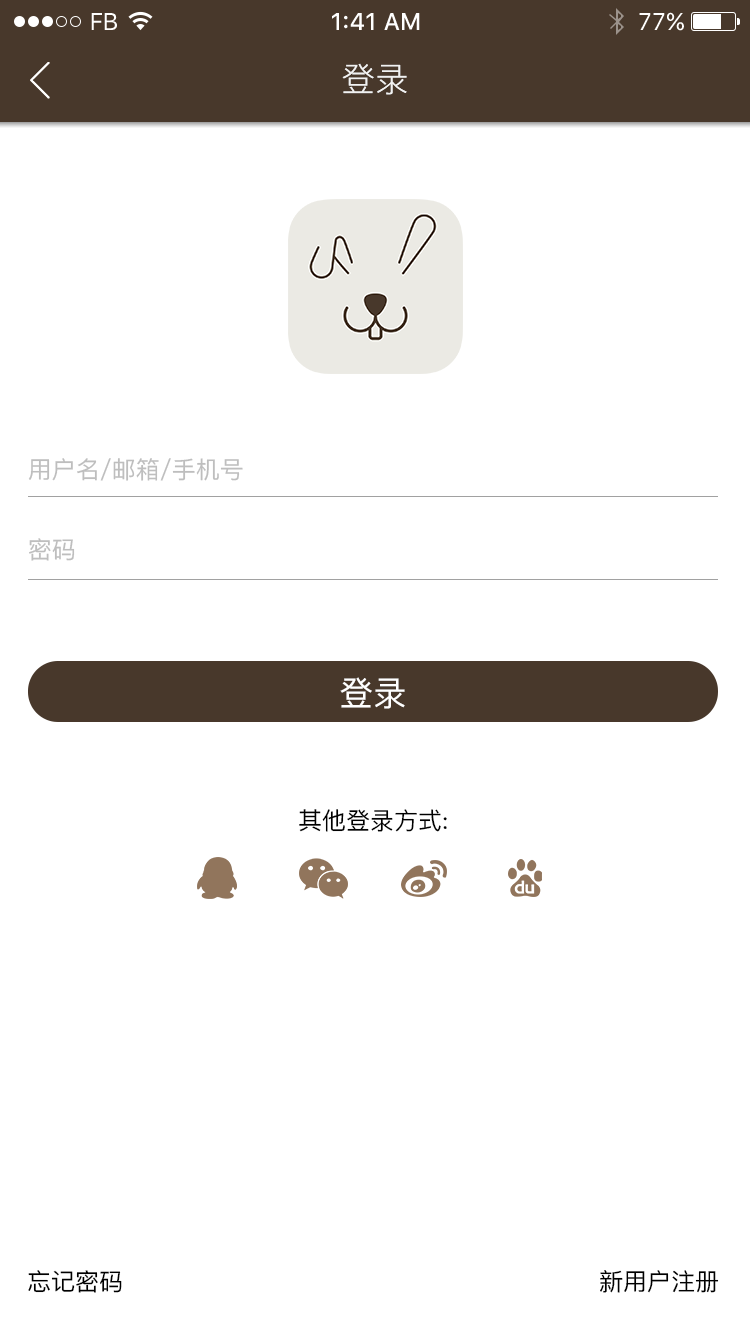
<style>
.page{position:relative;width:750px;height:1334px;background:#ffffff}
.page>*{position:absolute;margin:0}
.t1{font:24px "SFUIText-Regular";letter-spacing:-0.025em;color:#ffffff}
.t2{font:24px "SFUIText-Medium";color:#ffffff}
.t3{font:24px "SFUIText-Regular";color:#ffffff}
.t4{font:34px "PingFang-SC-Regular";color:#f1f1f1}
.t5{font:24px "PingFang-SC-Medium";color:#bebebe}
.t6{font:34px "PingFang-SC-Medium";color:#ffffff}
.t7{font:24px "PingFang-SC-Medium";color:#000000}
</style>
<div class="page">
<p class="t1" style="left:91px;top:13px;width:26px;height:17px">FB</p>
<p class="t2" style="left:332px;top:13px;width:88px;height:17px">1:41 AM</p>
<p class="t3" style="left:639px;top:12px;width:45px;height:19px">77%</p>
<p class="t4" style="left:342px;top:63px;width:65px;height:32px">登录</p>
<p class="t5" style="left:28px;top:458px;width:215px;height:23px">用户名/邮箱/手机号</p>
<p class="t5" style="left:29px;top:538px;width:46px;height:23px">密码</p>
<p class="t6" style="left:340px;top:677px;width:65px;height:32px">登录</p>
<p class="t7" style="left:299px;top:809px;width:148px;height:23px">其他登录方式:</p>
<p class="t7" style="left:28px;top:1270px;width:94px;height:23px">忘记密码</p>
<p class="t7" style="left:600px;top:1270px;width:119px;height:23px">新用户注册</p>
</div>
